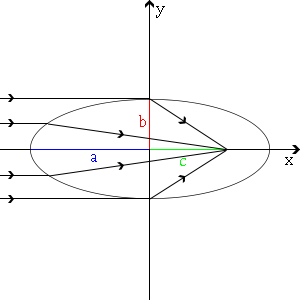
<style>
.page{position:relative;width:300px;height:300px;background:#ffffff}
.page>*{position:absolute;margin:0}
.t1{font:30px "CambriaMath";color:#000000}
.t2{font:29px "CambriaMath";color:#ff0000}
.t3{font:29px "CambriaMath";color:#0000ff}
.t4{font:29px "CambriaMath";color:#00ff00}
</style>
<div class="page">
<p class="t1" style="left:156px;top:6px;width:9px;height:12px">y</p>
<p class="t2" style="left:139px;top:115px;width:7px;height:12px">b</p>
<p class="t3" style="left:91px;top:154px;width:6px;height:8px">a</p>
<p class="t4" style="left:180px;top:158px;width:6px;height:8px">с</p>
<p class="t1" style="left:285px;top:157px;width:8px;height:8px">x</p>
</div>
